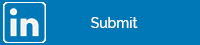
<style>
.page{position:relative;width:200px;height:45px;background:#0077b6}
.page>*{position:absolute;margin:0}
.t1{font:14px "Raleway-Medium";color:#ffffff}
</style>
<div class="page">
<p class="t1" style="left:91px;top:17px;width:47px;height:11px">Submit</p>
</div>
